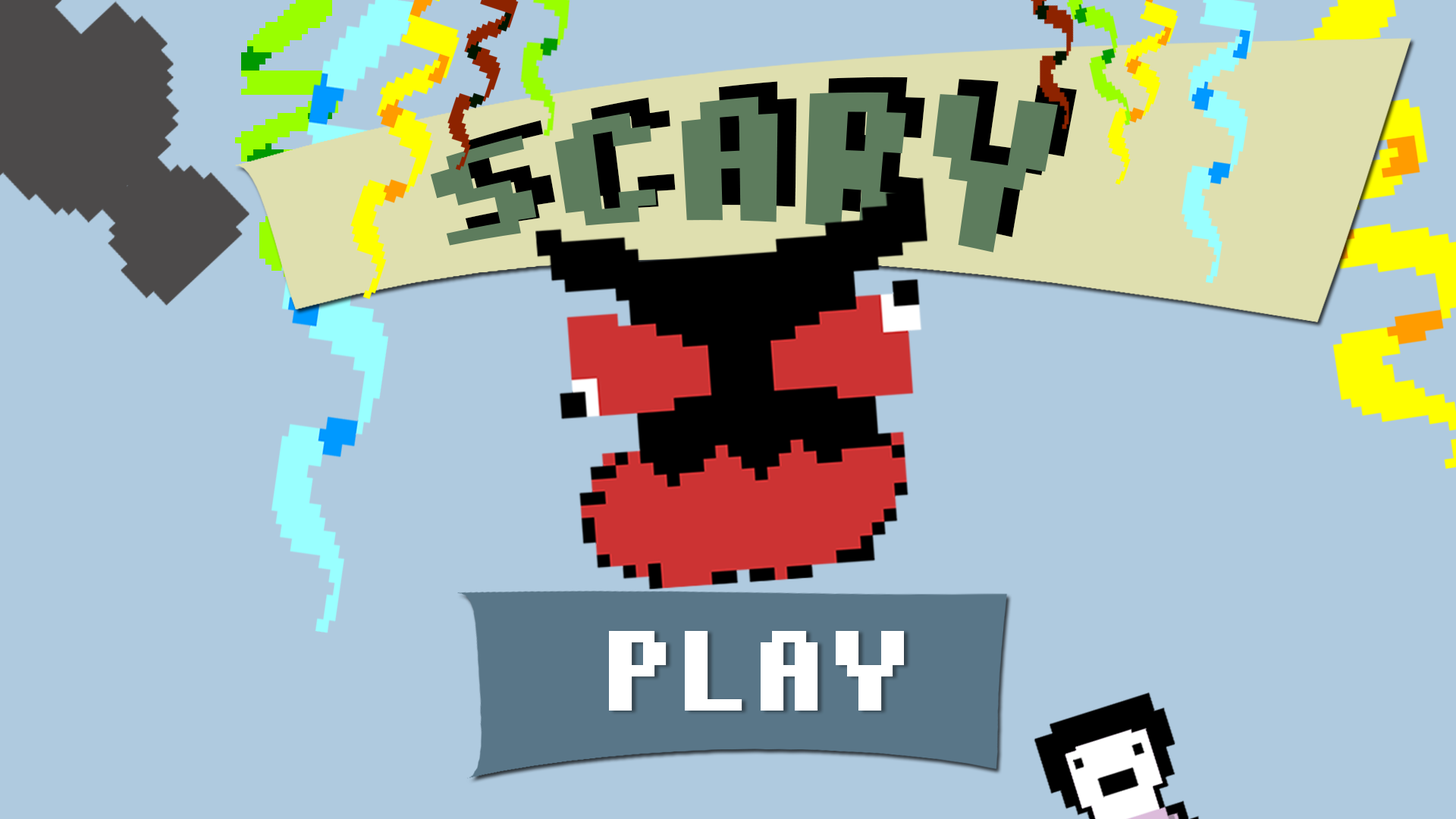
<style>
.page{position:relative;width:1456px;height:819px;background:#afcadf}
.page>*{position:absolute;margin:0}
.t1{font:141.6px "pixelmix-bold";letter-spacing:0.08em;text-transform:uppercase}
.t2{font:91px "pixelmix-bold";letter-spacing:0.08em;color:#ffffff;text-transform:uppercase}
</style>
<div class="page">
<p class="t1" style="left:449px;top:77px;width:628px;height:160px;rotate:-2deg">scary</p>
<p class="t2" style="left:609px;top:631px;width:295px;height:80px">play</p>
</div>
